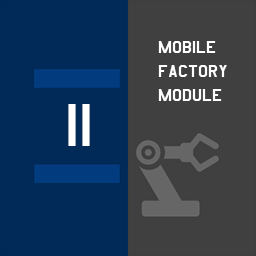
<style>
.page{position:relative;width:256px;height:256px;background:#012a59}
.page>*{position:absolute;margin:0}
.t1{font:20px "AmarilloUSAF";color:#ffffff}
.t2{font:70px "AmarilloUSAF";color:#ffffff}
</style>
<div class="page">
<p class="t1" style="left:158px;top:41px;width:69px;height:60px">mobile<br>factory<br>module</p>
<p class="t2" style="left:68px;top:104px;width:22px;height:42px">11</p>
</div>
